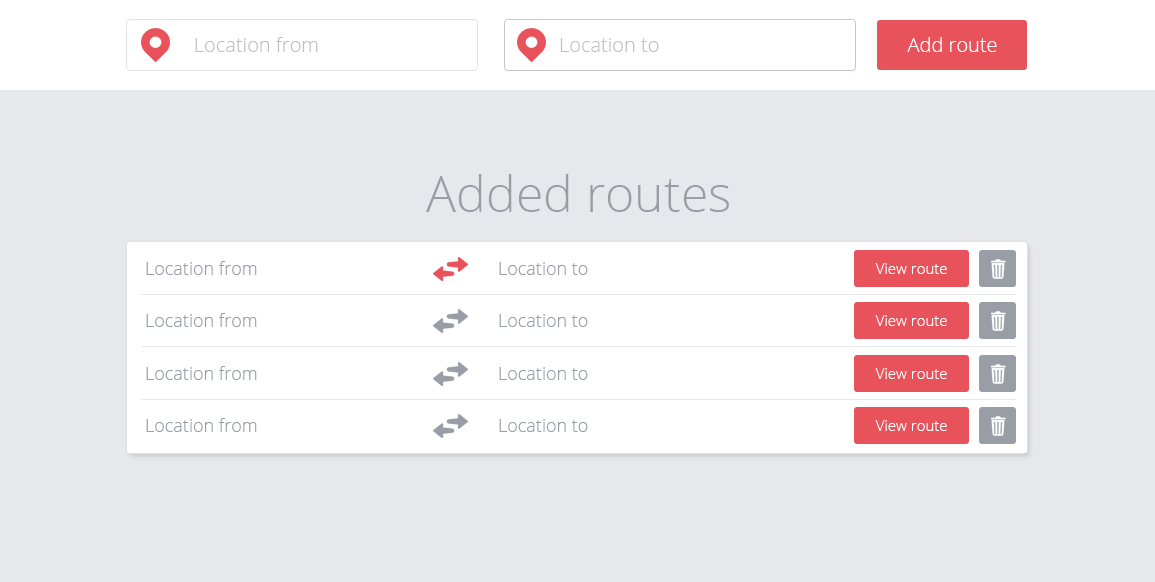
<style>
.page{position:relative;width:1155px;height:582px;background:#e7e8ec}
.page>*{position:absolute;margin:0}
.t1{font:20px "OpenSans-Light";color:#c0c0c0}
.t2{font:20px "OpenSans-Light";color:#ffffff}
.t3{font:50px "OpenSans-Light";color:#999da5}
.t4{font:18px "OpenSans-Light";color:#999da5}
.t5{font:15px "OpenSans-Light";color:#ffffff}
</style>
<div class="page">
<p class="t1" style="left:195px;top:37px;width:123px;height:15px">Location from</p>
<p class="t1" style="left:560px;top:38px;width:99px;height:14px">Location to</p>
<p class="t2" style="left:907px;top:37px;width:90px;height:15px">Add route</p>
<p class="t3" style="left:426px;top:174px;width:303px;height:38px">Added routes</p>
<p class="t4" style="left:146px;top:261px;width:111px;height:14px">Location from</p>
<p class="t4" style="left:499px;top:262px;width:89px;height:13px">Location to</p>
<p class="t5" style="left:875px;top:263px;width:72px;height:11px">View route</p>
<p class="t4" style="left:146px;top:313px;width:111px;height:14px">Location from</p>
<p class="t4" style="left:499px;top:314px;width:89px;height:13px">Location to</p>
<p class="t5" style="left:875px;top:315px;width:72px;height:11px">View route</p>
<p class="t4" style="left:146px;top:366px;width:111px;height:14px">Location from</p>
<p class="t4" style="left:499px;top:367px;width:89px;height:13px">Location to</p>
<p class="t5" style="left:875px;top:368px;width:72px;height:11px">View route</p>
<p class="t4" style="left:146px;top:418px;width:111px;height:14px">Location from</p>
<p class="t4" style="left:499px;top:419px;width:89px;height:13px">Location to</p>
<p class="t5" style="left:875px;top:420px;width:72px;height:11px">View route</p>
</div>
